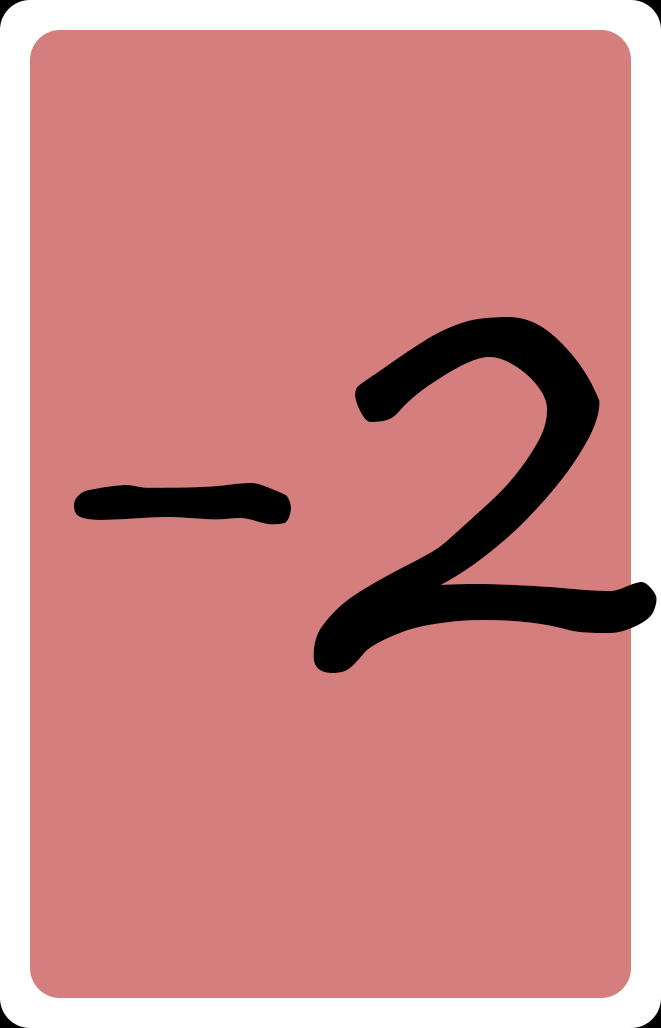
<style>
.page{position:relative;width:661px;height:1028px;background:#d57e7e}
.page>*{position:absolute;margin:0}
.t1{font:500px "SegoeScript";color:#000000}
</style>
<div class="page">
<p class="t1" style="left:73px;top:317px;width:584px;height:356px">-2</p>
</div>
